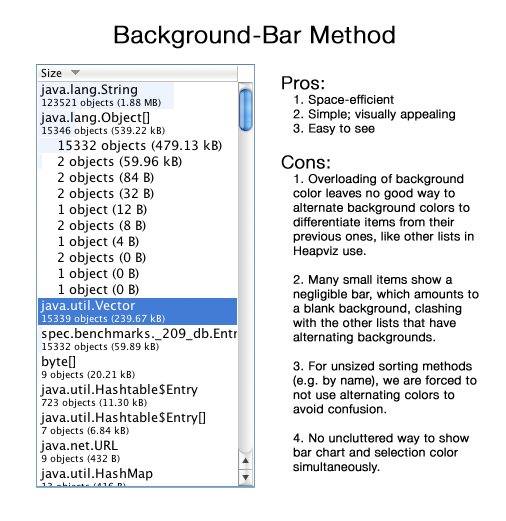
<style>
.page{position:relative;width:506px;height:521px;background:#ffffff}
.page>*{position:absolute;margin:0}
.t1{font:24px "HelveticaNeue-Light";letter-spacing:0.025em;color:#000000;font-weight:bold}
.t2{font:12px "HelveticaNeue-Light";letter-spacing:0.025em;color:#000000;font-weight:bold}
.t3{font:18px "HelveticaNeue-Light";letter-spacing:0.025em;color:#000000;font-weight:bold}
</style>
<div class="page">
<p class="t1" style="left:114px;top:25px;width:281px;height:24px">Background-Bar Method</p>
<p class="t2" style="left:281px;top:76px;width:198px;height:398px"><span class="t3">Pros:<br></span>1. Space-efficient<br>2. Simple; visually appealing<br>3. Easy to see<br><br><span class="t3">Cons:<br></span>1. Overloading of background color leaves no good way to alternate background colors to differentiate items from their previous ones, like other lists in Heapviz use.<br><br>2. Many small items show a negligible bar, which amounts to a blank background, clashing with the other lists that have alternating backgrounds.<br><br>3. For unsized sorting methods (e.g. by name), we are forced to not use alternating colors to avoid confusion.<br><br>4. No uncluttered way to show bar chart and selection color simultaneously.</p>
</div>
